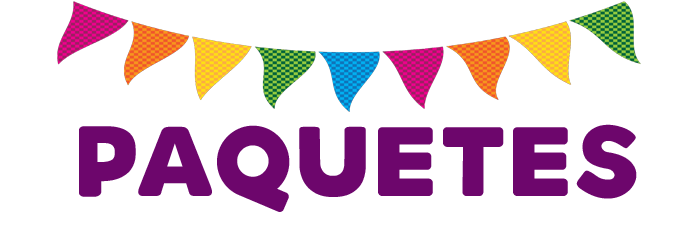
<style>
.page{position:relative;width:700px;height:252px;background:#ffffff}
.page>*{position:absolute;margin:0}
.t1{font:98.8px "Aquino-Demo";color:#6d066c}
</style>
<div class="page">
<p class="t1" style="left:79px;top:124px;width:558px;height:88px">PAQUETES</p>
</div>
